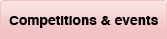
<style>
.page{position:relative;width:167px;height:39px;background:#f1c1c3}
.page>*{position:absolute;margin:0}
.t1{font:13px "Helvetica-Bold";color:#000000;scale:1.06 1}
</style>
<div class="page">
<p class="t1" style="left:9px;top:16px;width:149px;height:12px">Competitions &amp; events</p>
</div>
